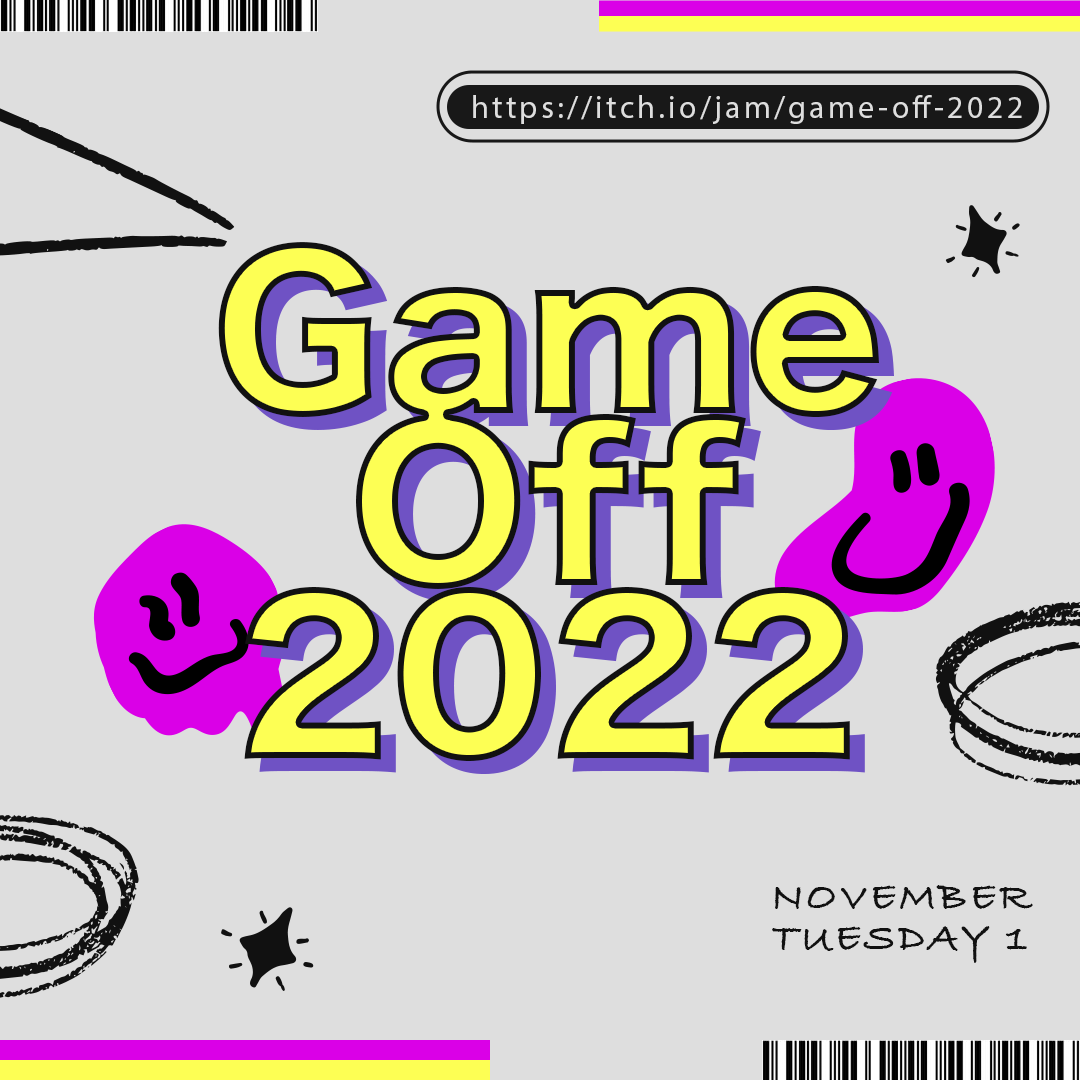
<style>
.page{position:relative;width:1080px;height:1080px;background:#dedede}
.page>*{position:absolute;margin:0}
.t1{font:32.1px "MyriadPro-Regular";letter-spacing:0.1em;color:#dedede}
.t2{font:202.7px/172.4px "HiraKakuStd-W8";color:#fdff54}
.t3{font:41.7px "BradleyHandITCTT-Bold";letter-spacing:0.075em;color:#111111;text-transform:uppercase}
</style>
<div class="page">
<p class="t1" style="left:473px;top:95px;width:549px;height:29px">https://itch.io/jam/game-off-2022</p>
<p class="t2" style="left:218px;top:242px;width:661px;height:519px;text-align:center">Game<br>Off<br>2022</p>
<p class="t3" style="left:775px;top:885px;width:258px;height:24px">November</p>
<p class="t3" style="left:772px;top:926px;width:255px;height:37px">Tuesday 1</p>
</div>
